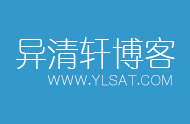
<style>
.page{position:relative;width:190px;height:124px;background:#3399cc}
.page>*{position:absolute;margin:0}
.t1{font:34.8px "Tensentype-JiaLiXianYuanJ";color:#ffffff;scale:0.92 1}
.t2{font:14px "Tensentype-JiaLiXianYuanJ";color:#ffffff}
</style>
<div class="page">
<p class="t1" style="left:16px;top:37px;width:159px;height:32px">异清轩博客</p>
<p class="t2" style="left:48px;top:74px;width:124px;height:12px">WWW.YLSAT.COM</p>
</div>
